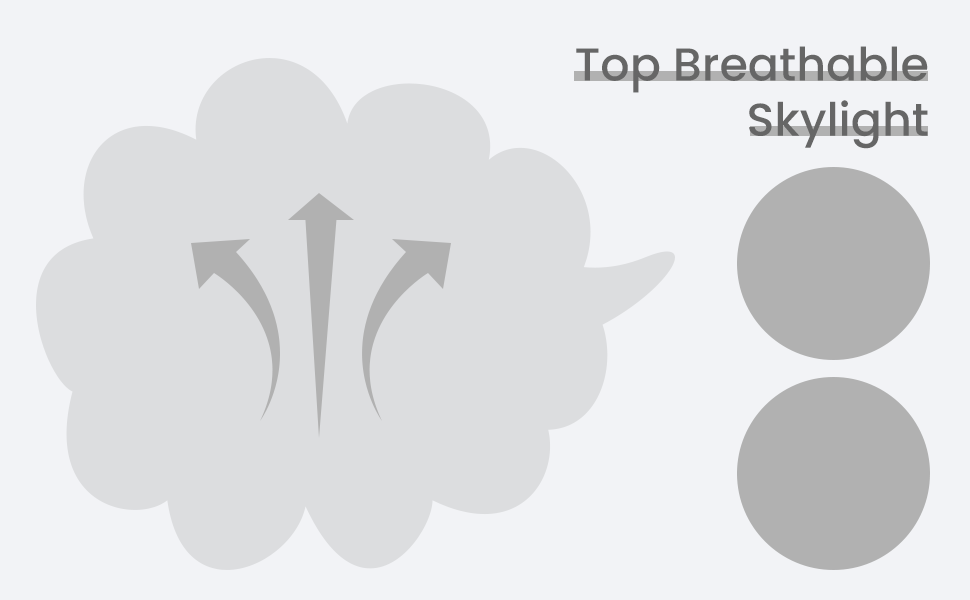
<style>
.page{position:relative;width:970px;height:600px;background:#f2f3f6}
.page>*{position:absolute;margin:0}
.t1{font:46px "Poppins-Medium";color:#666666}
</style>
<div class="page">
<p class="t1" style="left:576px;top:46px;width:352px;height:103px;text-align:right">Top Breathable<br>Skylight</p>
</div>
